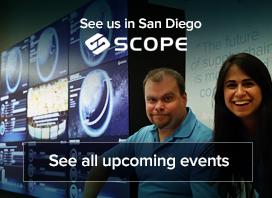
<style>
.page{position:relative;width:272px;height:198px}
.page>*{position:absolute;margin:0}
.t1{font:14px "ProximaNova-Semibold";letter-spacing:-0.012em;color:#ffffff}
.t2{font:17px "ProximaNova-Semibold";letter-spacing:-0.012em;color:#ffffff}
</style>
<div class="page">
<p class="t1" style="left:80px;top:18px;width:122px;height:13px">See us in San Diego</p>
<p class="t2" style="left:49px;top:154px;width:180px;height:16px">See all upcoming events</p>
</div>
